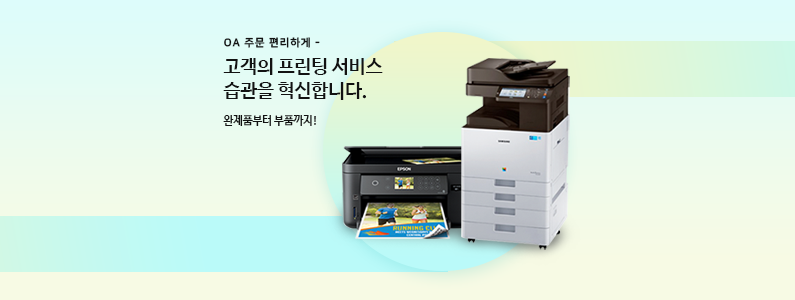
<style>
.page{position:relative;width:795px;height:300px}
.page>*{position:absolute;margin:0}
.t1{font:10.8px "NanumSquareEB";letter-spacing:0.075em;color:#121212}
.t2{font:19.8px "NanumBarunGothicBold";letter-spacing:-0.025em;color:#121212}
.t3{font:11.4px "NanumBarunGothicBold";letter-spacing:-0.025em;color:#121212}
</style>
<div class="page">
<p class="t1" style="left:224px;top:37px;width:96px;height:11px">OA 주문 편리하게 -</p>
<p class="t2" style="left:223px;top:58px;width:160px;height:68px">고객의 프린팅 서비스 <br>습관을 혁신합니다.<br><span class="t3"><br>완제품부터 부품까지!</span></p>
</div>
